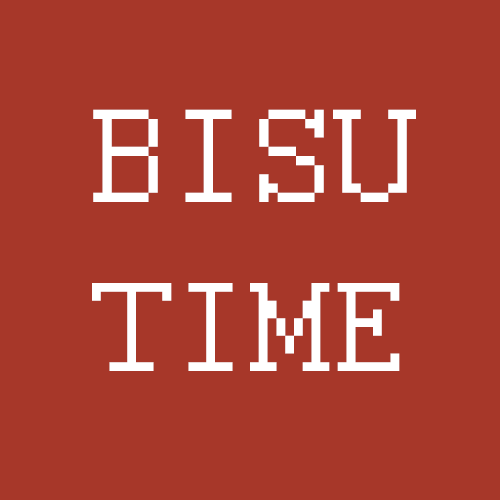
<style>
.page{position:relative;width:500px;height:500px;background:#a73729}
.page>*{position:absolute;margin:0}
.t1{font:147.5px "Courier";color:#ffffff}
.t2{font:140.7px "Courier";color:#ffffff}
</style>
<div class="page">
<p class="t1" style="left:93px;top:109px;width:323px;height:93px">BISU</p>
<p class="t2" style="left:92px;top:283px;width:308px;height:88px">TIME</p>
</div>
